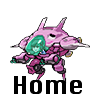
<style>
.page{position:relative;width:100px;height:100px;background:#ffffff}
.page>*{position:absolute;margin:0}
.t1{font:24px "Silom";color:#000000}
</style>
<div class="page">
<p class="t1" style="left:14px;top:76px;width:68px;height:18px">Home</p>
</div>
